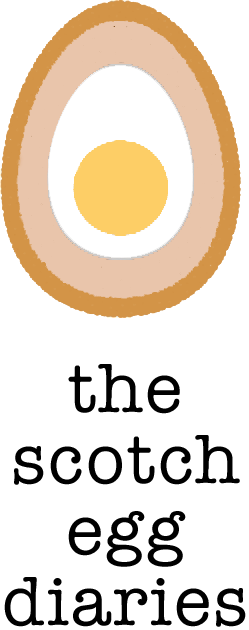
<style>
.page{position:relative;width:249px;height:630px;background:#ffffff}
.page>*{position:absolute;margin:0}
.t1{font:70.8px/70.8px "AmericanTypewriter";letter-spacing:0.03em;color:#000000}
</style>
<div class="page">
<p class="t1" style="left:4px;top:364px;width:242px;height:263px;text-align:center">the<br>scotch<br>egg<br>diaries</p>
</div>
